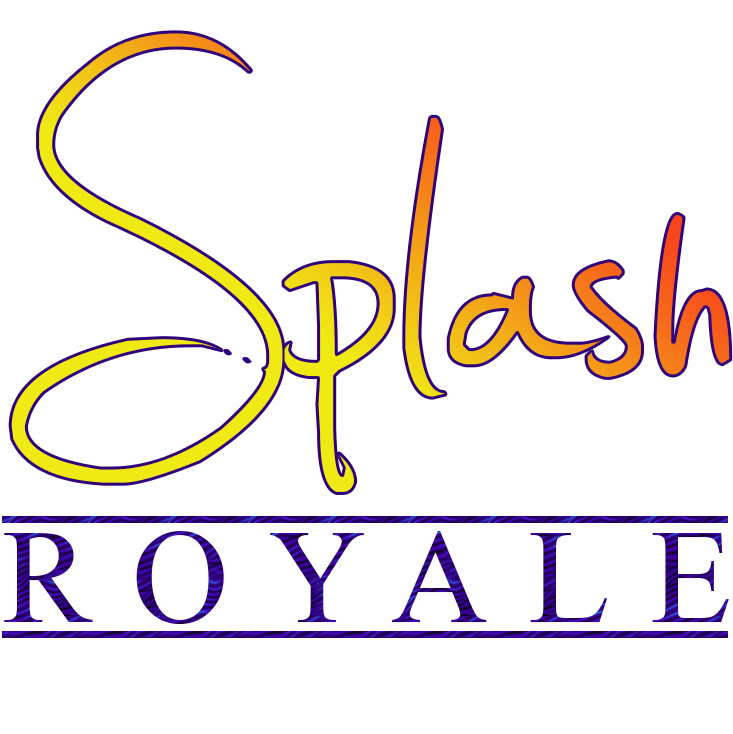
<style>
.page{position:relative;width:733px;height:734px;background:#ffffff}
.page>*{position:absolute;margin:0}
.t1{font:824px "Jellyka---Estrya's-Handwriting"}
.t2{font:134px "TimesNewRomanPSMT";letter-spacing:0.3em}
</style>
<div class="page">
<p class="t1" style="left:10px;top:31px;width:721px;height:463px">Splash</p>
<p class="t2" style="left:4px;top:531px;width:725px;height:93px">ROYALE</p>
</div>
